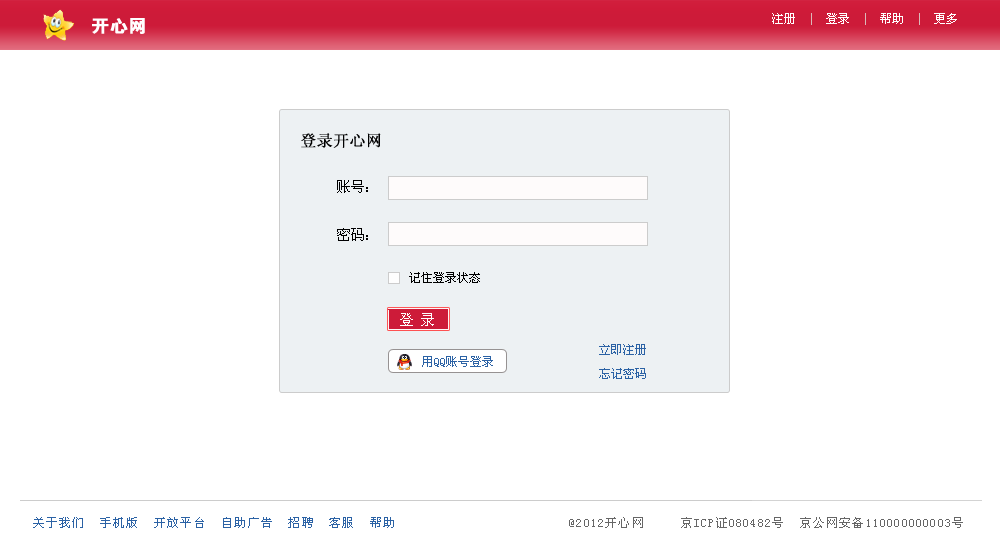
<style>
.page{position:relative;width:1000px;height:551px;background:#ffffff}
.page>*{position:absolute;margin:0}
.t1{font:12px "SimSun";color:#ffffff}
.t2{font:12px "SimSun";color:#dbb9b9}
.t3{font:18px "FZDHTJW--GB1-0";color:#ffffff;font-weight:bold}
.t4{font:16px "SimSun";color:#000000;font-weight:bold}
.t5{font:14px/48px "SimSun";color:#000000}
.t6{font:12px "SimSun";color:#000000}
.t7{font:14px "SimSun";color:#fefdfd}
.t8{font:12px/24px "SimSun";color:#2b62a5}
.t9{font:12px "SimSun";color:#2b62a5}
.t10{font:12px "SimSun";letter-spacing:0.1em;color:#666666}
.t11{font:12px "SimSun";letter-spacing:0.1em;color:#2b62a5}
</style>
<div class="page">
<p class="t1" style="left:772px;top:13px;width:185px;height:12px">注册  <span class="t2">|</span>  登录  <span class="t2">|</span>  帮助  <span class="t2">|</span>  更多</p>
<p class="t3" style="left:92px;top:18px;width:53px;height:16px">开心网</p>
<p class="t4" style="left:301px;top:133px;width:80px;height:15px">登录开心网</p>
<p class="t5" style="left:337px;top:180px;width:31px;height:61px">账号：<br>密码：</p>
<p class="t6" style="left:409px;top:272px;width:71px;height:11px">记住登录状态</p>
<p class="t7" style="left:400px;top:313px;width:34px;height:13px">登 录</p>
<p class="t8" style="left:599px;top:344px;width:47px;height:35px">立即注册<br>忘记密码</p>
<p class="t9" style="left:422px;top:356px;width:71px;height:11px">用QQ账号登录</p>
<p class="t10" style="left:33px;top:517px;width:930px;height:11px"><span class="t11">    关于我们  手机版  开放平台  自助广告  招聘  客服  帮助                        </span>@2012开心网     京ICP证080482号  京公网安备110000000003号</p>
</div>
